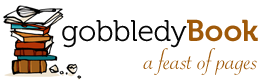
<style>
.page{position:relative;width:268px;height:81px;background:#ffffff}
.page>*{position:absolute;margin:0}
.t1{font:30px/28px "SavoyeLetPlain";color:#9f5909}
.t2{font:30px/28px "Museo-300";color:#050505}
.t3{font:30px/28px "Museo-700";color:#9f5909}
</style>
<div class="page">
<p class="t1" style="left:62px;top:19px;width:196px;height:56px;text-align:right"><span class="t2">gobbledy</span><span class="t3">Book<br></span>a feast of pages</p>
</div>
